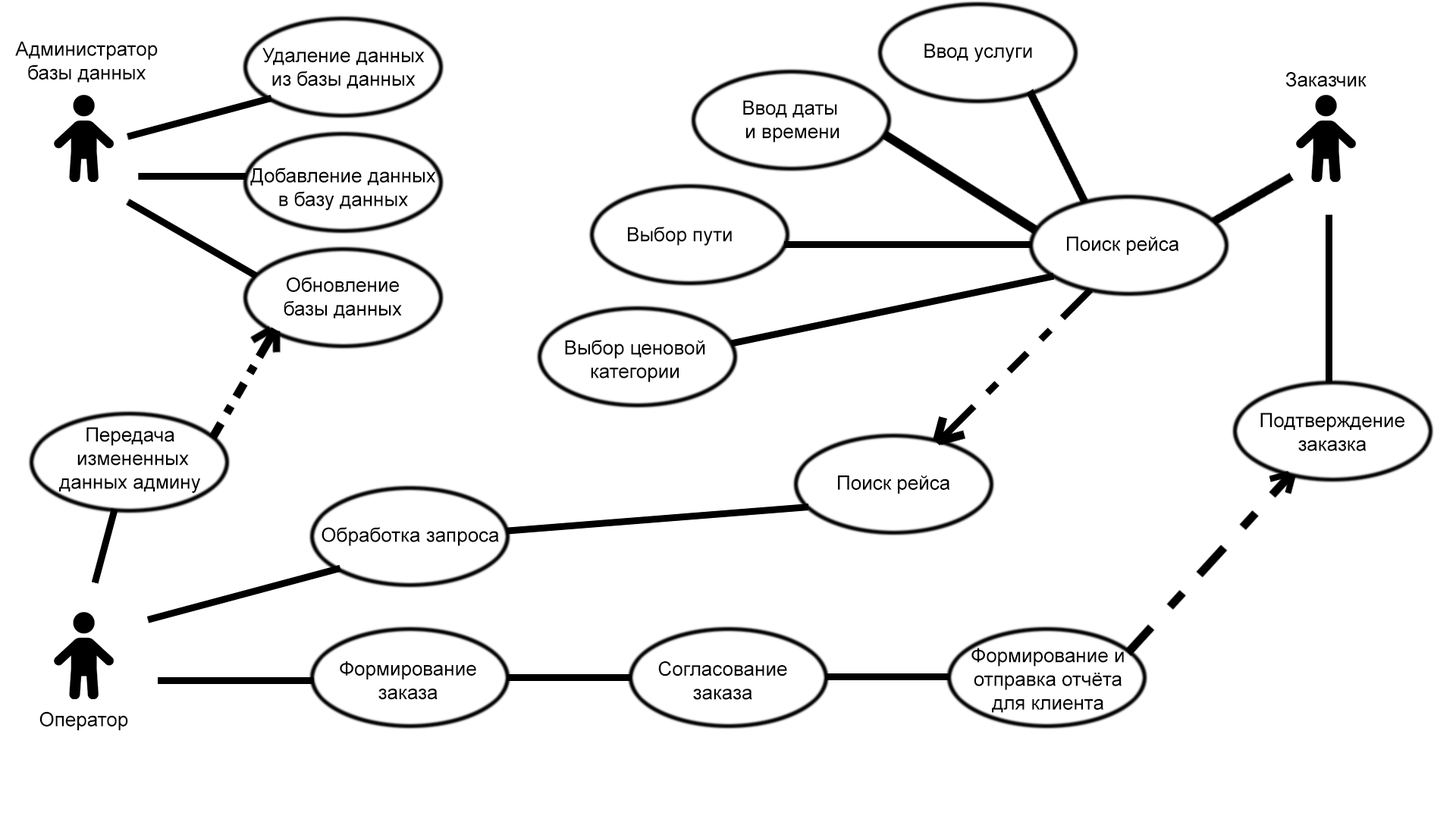
<style>
.page{position:relative;width:1456px;height:819px;background:#ffffff}
.page>*{position:absolute;margin:0}
.t1{font:19.7px "ArialMT";color:#000000}
</style>
<div class="page">
<p class="t1" style="left:15px;top:41px;width:143px;height:42px;text-align:center">Администратор<br>базы данных</p>
<p class="t1" style="left:262px;top:48px;width:163px;height:41px;text-align:center">Удаление данных<br>из базы данных</p>
<p class="t1" style="left:924px;top:43px;width:108px;height:19px">Ввод услуги</p>
<p class="t1" style="left:1285px;top:72px;width:81px;height:15px">Заказчик</p>
<p class="t1" style="left:743px;top:100px;width:96px;height:43px;text-align:center">Ввод даты<br> и времени</p>
<p class="t1" style="left:250px;top:168px;width:186px;height:43px;text-align:center">Добавление данных<br>в базу данных</p>
<p class="t1" style="left:628px;top:227px;width:104px;height:19px">Выбор пути</p>
<p class="t1" style="left:1067px;top:237px;width:112px;height:18px">Поиск рейса</p>
<p class="t1" style="left:284px;top:277px;width:118px;height:41px;text-align:center">Обновление<br>базы данных</p>
<p class="t1" style="left:565px;top:340px;width:140px;height:42px;text-align:center">Выбор ценовой<br>категории</p>
<p class="t1" style="left:1260px;top:413px;width:144px;height:38px;text-align:center">Подтверждение<br>заказка</p>
<p class="t1" style="left:59px;top:427px;width:141px;height:66px;text-align:center">Передача<br> измененных<br>данных админу</p>
<p class="t1" style="left:838px;top:475px;width:112px;height:19px">Поиск рейса</p>
<p class="t1" style="left:322px;top:527px;width:177px;height:19px">Обработка запроса</p>
<p class="t1" style="left:971px;top:648px;width:153px;height:65px;text-align:center">Формирование и<br>отправка отчёта<br>для клиента</p>
<p class="t1" style="left:340px;top:661px;width:136px;height:39px;text-align:center">Формирование<br>заказа</p>
<p class="t1" style="left:658px;top:661px;width:129px;height:39px;text-align:center">Согласование<br>заказа</p>
<p class="t1" style="left:39px;top:711px;width:89px;height:19px">Оператор</p>
</div>
